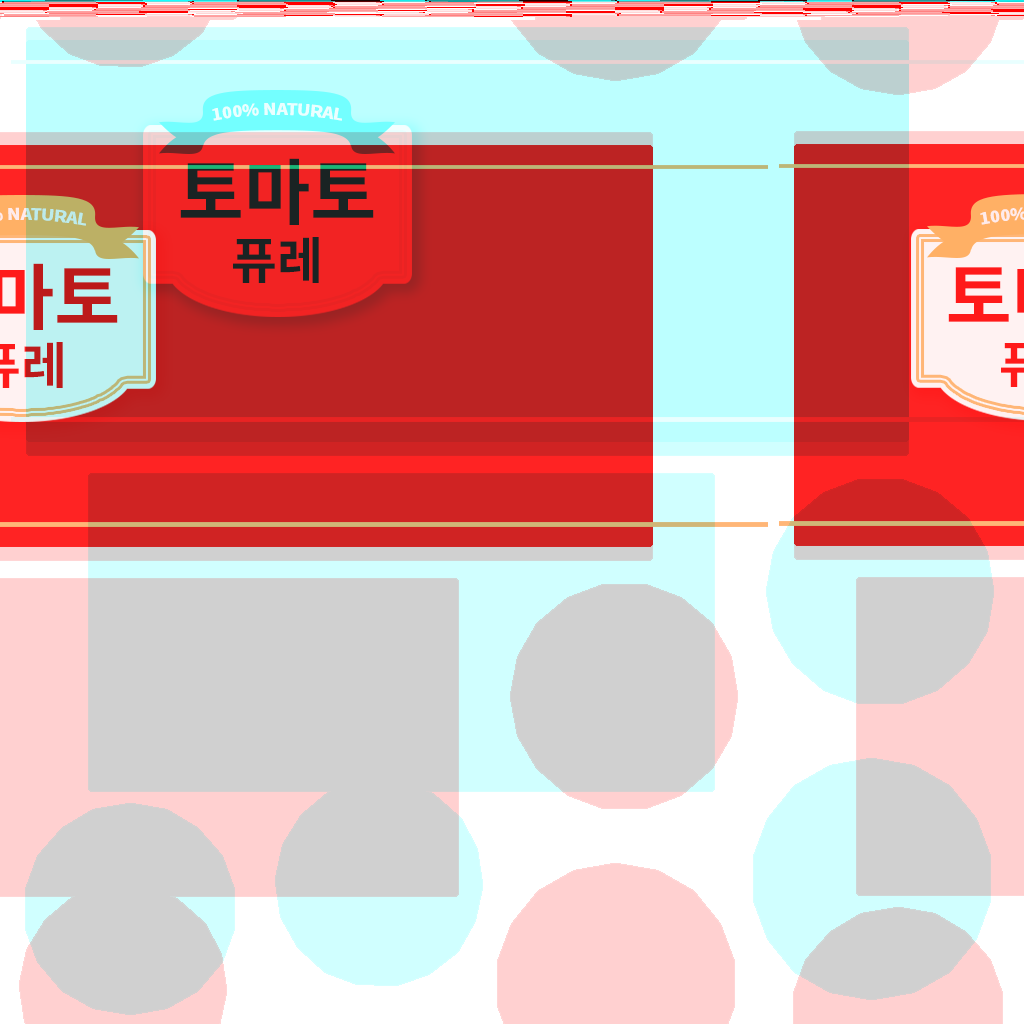
<style>
.page{position:relative;width:1024px;height:1024px;background:#d0d0d0}
.page>*{position:absolute;margin:0}
.t1{font:16px "NotoSansCJKkr-Black";color:#ebebeb}
.t2{font:72px "NotoSansCJKkr-Bold";color:#1a1a1a}
.t3{font:50px "NotoSansCJKkr-Bold";color:#1a1a1a}
</style>
<div class="page">
<p class="t1" style="left:212px;top:100px;width:130px;height:19px">100% NATURAL</p>
<p class="t2" style="left:180px;top:156px;width:194px;height:125px;text-align:center">토마토<br><span class="t3">퓨레</span></p>
</div>
